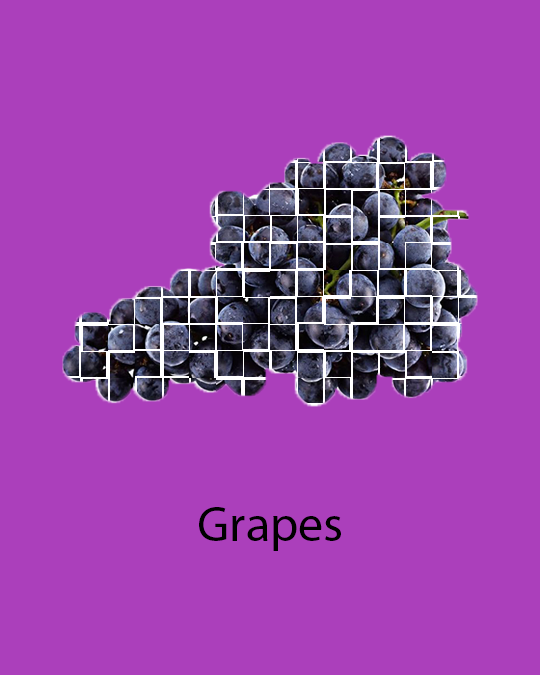
<style>
.page{position:relative;width:540px;height:675px;background:#ab3fbb}
.page>*{position:absolute;margin:0}
.t1{font:50px "MyriadPro-Regular";color:#000000}
</style>
<div class="page">
<p class="t1" style="left:199px;top:507px;width:142px;height:44px">Grapes</p>
</div>
